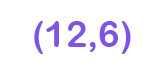
<style>
.page{position:relative;width:160px;height:75px;background:#ffffff}
.page>*{position:absolute;margin:0}
.t1{font:36px "ArialRoundedMTBold";color:#7e54e7}
</style>
<div class="page">
<p class="t1" style="left:34px;top:21px;width:97px;height:33px">(12,6)</p>
</div>
